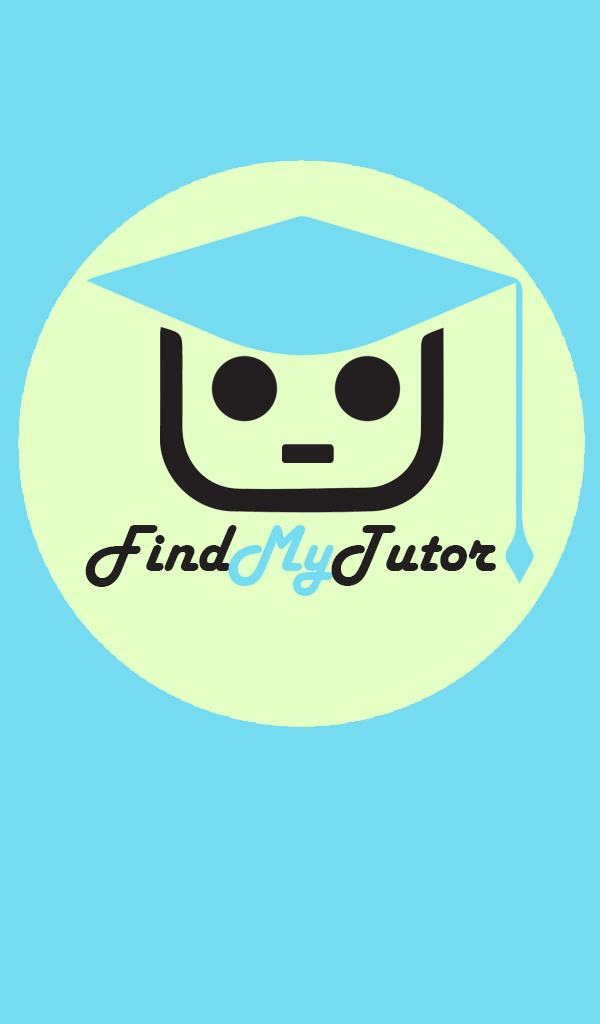
<style>
.page{position:relative;width:600px;height:1024px;background:#75dbf1}
.page>*{position:absolute;margin:0}
.t1{font:69px "HarlowSolid";color:#231f20}
.t2{font:69px "HarlowSolid";color:#75dbf1}
</style>
<div class="page">
<p class="t1" style="left:85px;top:525px;width:411px;height:71px">Find<span class="t2">My</span>Tutor</p>
</div>
